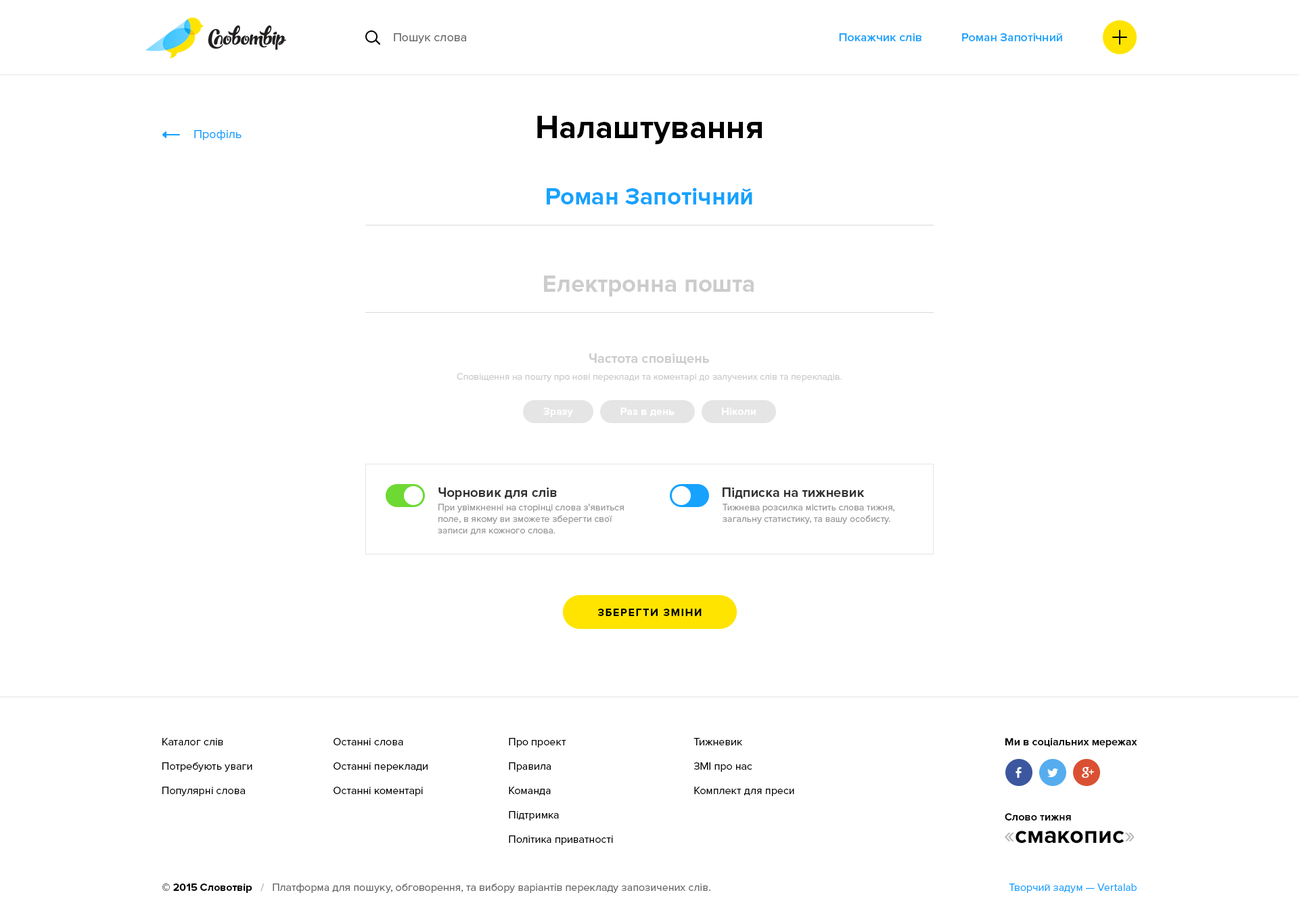
<style>
.page{position:relative;width:1299px;height:918px;background:#ffffff}
.page>*{position:absolute;margin:0}
.t1{font:12.2px "ProximaNova-Regular";color:#666666}
.t2{font:12.2px "ProximaNova-Semibold";color:#17a2ff}
.t3{font:32.5px "ProximaNova-Bold";color:#000000}
.t4{font:12.2px "ProximaNova-Regular";color:#17a2ff}
.t5{font:24.4px "ProximaNova-Bold";color:#17a2ff}
.t6{font:24.4px "ProximaNova-Bold";color:#cccccc}
.t7{font:13.5px "ProximaNova-Bold";color:#cccccc}
.t8{font:9.5px "ProximaNova-Regular";color:#cccccc}
.t9{font:10.8px "ProximaNova-Bold";color:#ffffff}
.t10{font:13.5px "ProximaNova-Bold";color:#333333}
.t11{font:9.5px "ProximaNova-Regular";color:#999999}
.t12{font:10.8px "ProximaNova-Bold";letter-spacing:0.1em;color:#000000;text-transform:uppercase}
.t13{font:10.8px/24.4px "ProximaNova-Regular";color:#000000}
.t14{font:10.8px/24.4px "ProximaNova-Regular";color:#010101}
.t15{font:10.8px "ProximaNova-Bold";color:#010101}
.t16{font:24.4px "ProximaNova-Bold";color:#000000}
.t17{font:24.4px "ProximaNova-Regular";color:#b3b3b3}
.t18{font:10.8px "ProximaNova-Regular";color:#666666}
.t19{font:10.8px "ProximaNova-Bold";color:#000000}
.t20{font:10.8px "ProximaNova-Bold";color:#bfbfbf}
.t21{font:10.8px "ProximaNova-Regular";color:#17a2ff}
</style>
<div class="page">
<p class="t1" style="left:394px;top:33px;width:72px;height:10px">Пошук слова</p>
<p class="t2" style="left:839px;top:33px;width:83px;height:8px">Покажчик слів</p>
<p class="t2" style="left:962px;top:33px;width:101px;height:8px">Роман Запотічний</p>
<p class="t3" style="left:537px;top:116px;width:225px;height:28px">Налаштування</p>
<p class="t4" style="left:194px;top:130px;width:48px;height:10px">Профіль</p>
<p class="t5" style="left:547px;top:187px;width:206px;height:17px">Роман Запотічний</p>
<p class="t6" style="left:544px;top:275px;width:210px;height:21px">Електронна пошта</p>
<p class="t7" style="left:589px;top:353px;width:120px;height:12px">Частота сповіщень</p>
<p class="t8" style="left:457px;top:373px;width:385px;height:9px">Сповіщення на пошту про нові переклади та коментарі до залучених слів та перекладів.</p>
<p class="t9" style="left:543px;top:407px;width:30px;height:10px">Зразу</p>
<p class="t9" style="left:621px;top:407px;width:54px;height:9px">Раз в день</p>
<p class="t9" style="left:722px;top:407px;width:34px;height:8px">Ніколи</p>
<p class="t10" style="left:439px;top:487px;width:118px;height:12px">Чорновик для слів</p>
<p class="t10" style="left:723px;top:487px;width:142px;height:12px">Підписка на тижневик</p>
<p class="t11" style="left:438px;top:504px;width:186px;height:31px">При увімкненні на сторінці слова з'явиться<br>поле, в якому ви зможете зберегти свої<br>записи для кожного слова.</p>
<p class="t11" style="left:723px;top:504px;width:172px;height:20px">Тижнева розсилка містить слова тижня,<br>загальну статистику, та вашу особисту.</p>
<p class="t12" style="left:598px;top:608px;width:104px;height:8px">Зберегти зміни</p>
<p class="t13" style="left:162px;top:738px;width:90px;height:58px">Каталог слів<br>Потребують уваги<br>Популярні слова</p>
<p class="t13" style="left:334px;top:738px;width:94px;height:58px">Останні слова<br>Останні переклади<br>Останні коментарі</p>
<p class="t13" style="left:509px;top:738px;width:104px;height:107px">Про проект<br>Правила<br>Команда<br>Підтримка<br>Політика приватності</p>
<p class="t14" style="left:694px;top:738px;width:101px;height:58px">Тижневик<br>ЗМІ про нас<br>Комплект для преси</p>
<p class="t15" style="left:1006px;top:738px;width:132px;height:9px">Ми в соціальних мережах</p>
<p class="t15" style="left:1005px;top:813px;width:66px;height:7px">Слово тижня</p>
<p class="t16" style="left:1005px;top:830px;width:130px;height:13px"><span class="t17">«</span>смакопис<span class="t17">»</span></p>
<p class="t18" style="left:162px;top:883px;width:549px;height:10px"><span class="t19">© 2015 Словотвір   </span><span class="t20">/   </span>Платформа для пошуку, обговорення, та вибору варіантів перекладу запозичених слів.</p>
<p class="t21" style="left:1009px;top:883px;width:128px;height:10px">Творчий задум — Vertalab</p>
</div>
